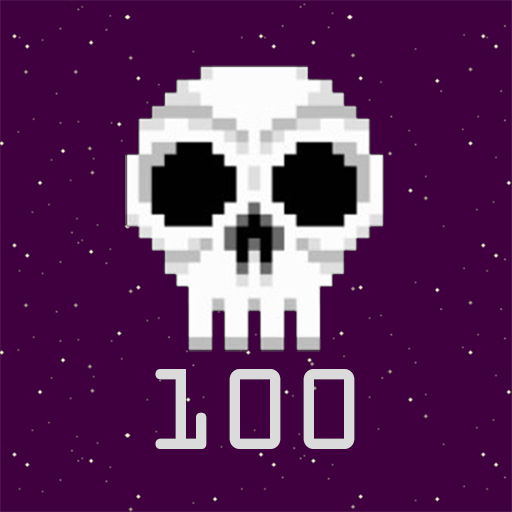
<style>
.page{position:relative;width:512px;height:512px;background:#400040}
.page>*{position:absolute;margin:0}
.t1{font:102.4px "OCRAStd";color:#dbdbdb}
</style>
<div class="page">
<p class="t1" style="left:155px;top:369px;width:200px;height:80px">100</p>
</div>
